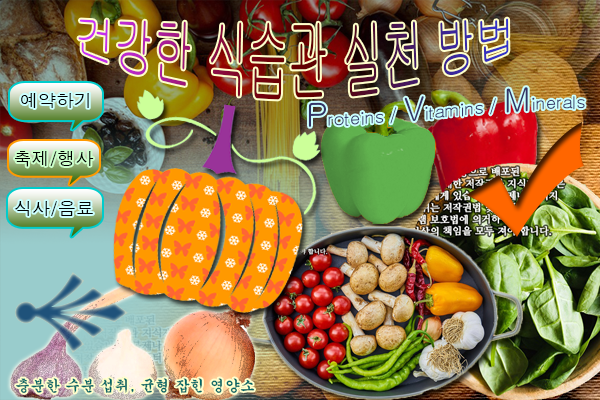
<style>
.page{position:relative;width:600px;height:400px}
.page>*{position:absolute;margin:0}
.t1{font:17.8px "Dotum";color:#000000}
.t2{font:14.8px "Gungsuh";color:#006666}
</style>
<div class="page">
<p class="t1" style="left:21px;top:93px;width:68px;height:15px">예약하기</p>
<p class="t1" style="left:15px;top:151px;width:79px;height:16px">축제/행사</p>
<p class="t1" style="left:14px;top:201px;width:79px;height:16px">식사/음료</p>
<p class="t2" style="left:16px;top:378px;width:239px;height:16px">충분한 수분 섭취, 균형 잡힌 영양소</p>
</div>
